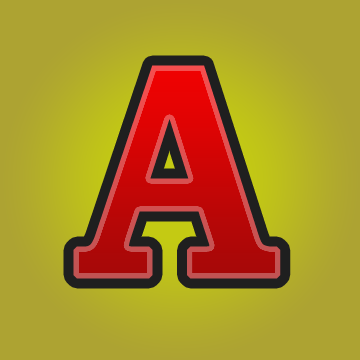
<style>
.page{position:relative;width:360px;height:360px;background:#ada332}
.page>*{position:absolute;margin:0}
.t1{font:285.6px "Clarendon-Bold";font-weight:bold;scale:0.81 1}
</style>
<div class="page">
<p class="t1" style="left:73px;top:65px;width:208px;height:214px">A</p>
</div>
